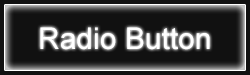
<style>
.page{position:relative;width:250px;height:75px;background:#111111}
.page>*{position:absolute;margin:0}
.t1{font:30px "ArialMT";color:#ffffff}
</style>
<div class="page">
<p class="t1" style="left:40px;top:27px;width:170px;height:23px">Radio Button</p>
</div>
